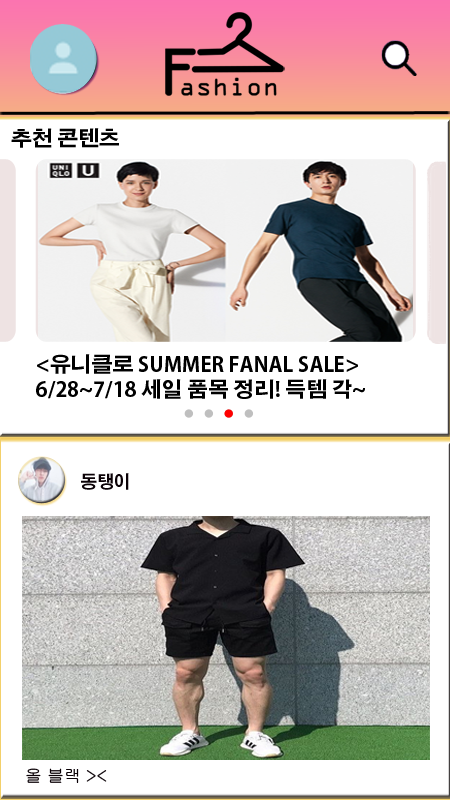
<style>
.page{position:relative;width:450px;height:800px;background:#ffffff}
.page>*{position:absolute;margin:0}
.t1{font:20.8px "AdobeGothicStd-Bold";color:#000000}
.t2{font:17.2px "AdobeGothicStd-Bold";color:#0a0106;scale:0.97 1}
.t3{font:17.2px "Gulim";color:#0a0106;scale:0.97 1}
</style>
<div class="page">
<p class="t1" style="left:11px;top:128px;width:108px;height:20px">추천 콘텐츠</p>
<p class="t1" style="left:36px;top:354px;width:329px;height:45px">&lt;유니클로 SUMMER FANAL SALE&gt;<br>6/28~7/18 세일 품목 정리! 득템 각~</p>
<p class="t2" style="left:81px;top:473px;width:48px;height:17px">동탱이</p>
<p class="t3" style="left:26px;top:768px;width:81px;height:15px">올 블랙 &gt;&lt;</p>
</div>
